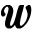
<style>
.page{position:relative;width:32px;height:32px;background:#ffffff}
.page>*{position:absolute;margin:0}
.t1{font:32.3px "ScriptMTBold";letter-spacing:0.12em;color:#000000;font-weight:bold}
</style>
<div class="page">
<p class="t1" style="left:1px;top:5px;width:31px;height:24px">W</p>
</div>
